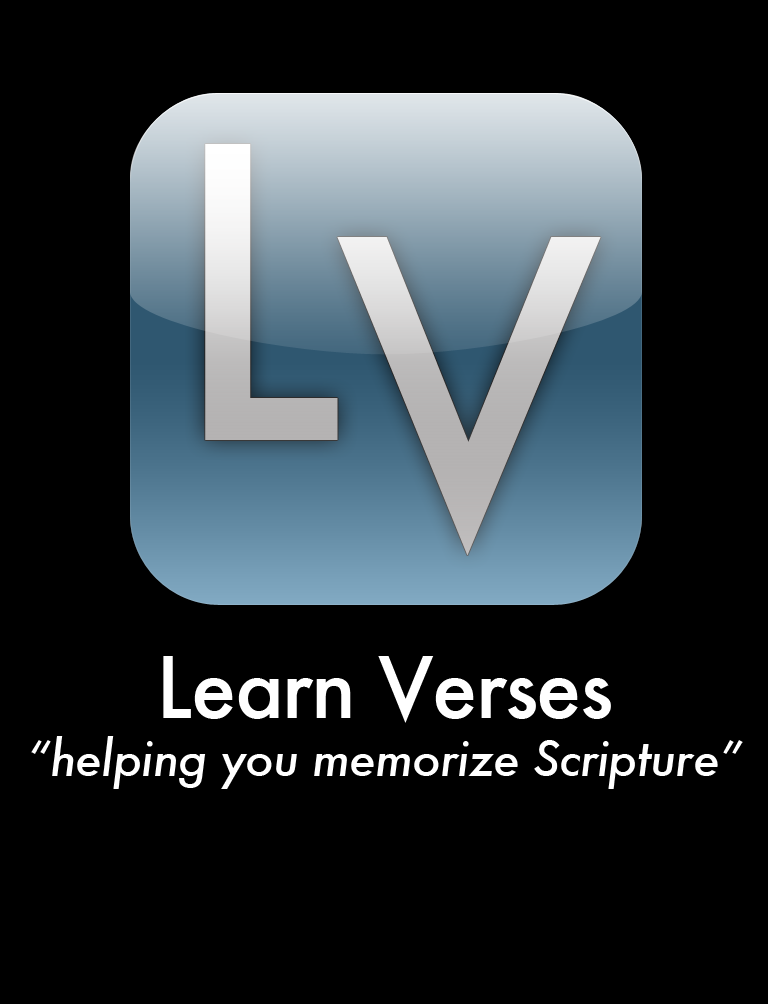
<style>
.page{position:relative;width:768px;height:1004px;background:#000000}
.page>*{position:absolute;margin:0}
.t1{font:393px "Futura-Medium";letter-spacing:-0.02em}
.t2{font:48px "Futura-MediumItalic";letter-spacing:-0.02em;color:#ffffff}
.t3{font:82px "Futura-Medium";letter-spacing:-0.02em;color:#ffffff}
</style>
<div class="page">
<p class="t1" style="left:205px;top:144px;width:396px;height:411px">LV</p>
<p class="t2" style="left:31px;top:656px;width:712px;height:133px;text-align:center"><span class="t3">Learn Verses<br></span>“helping you memorize Scripture”</p>
</div>
